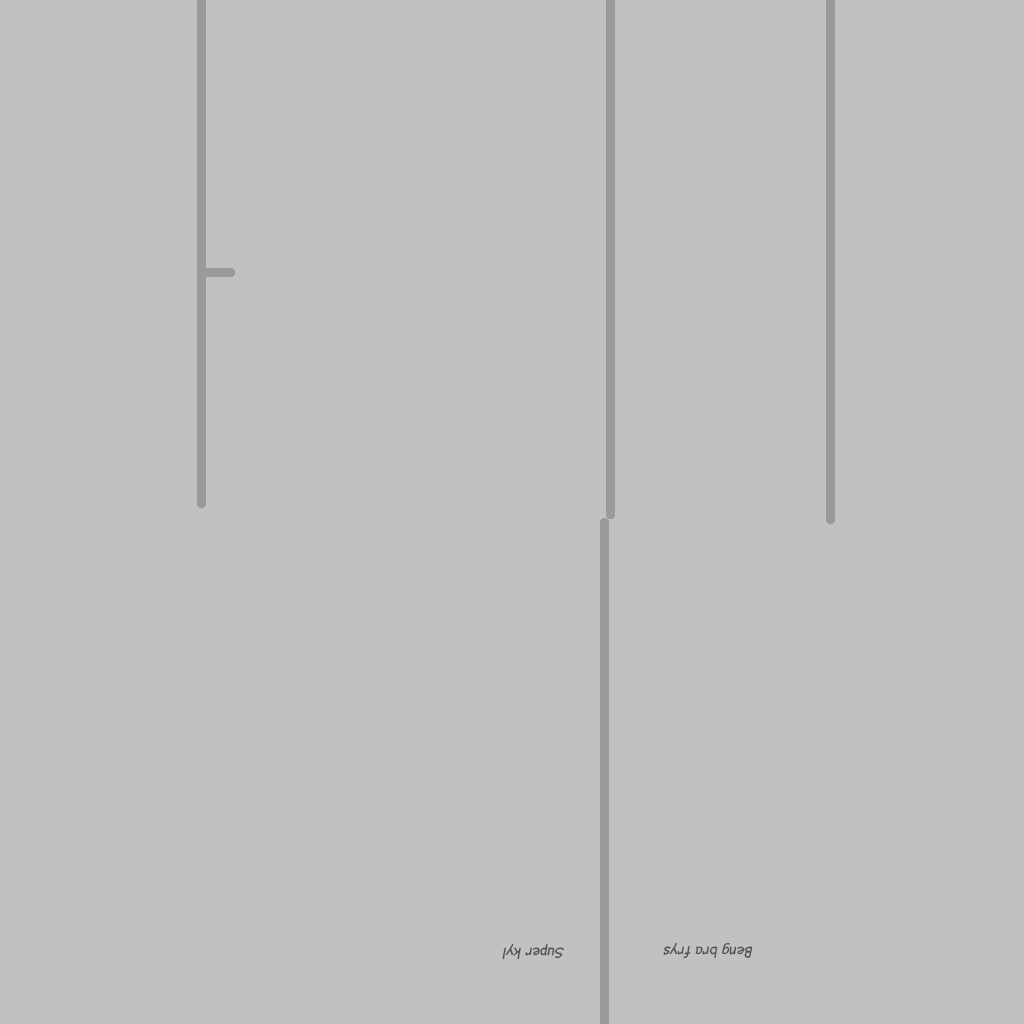
<style>
.page{position:relative;width:1024px;height:1024px;background:#c1c1c1}
.page>*{position:absolute;margin:0}
.t1{font:14px "ComicSansMS-Italic";color:#515151}
</style>
<div class="page">
<p class="t1" style="left:663px;top:942px;width:90px;height:17px;rotate:-180deg">Beng bra frys</p>
<p class="t1" style="left:502px;top:943px;width:62px;height:17px;rotate:-180deg">Super kyl</p>
</div>
